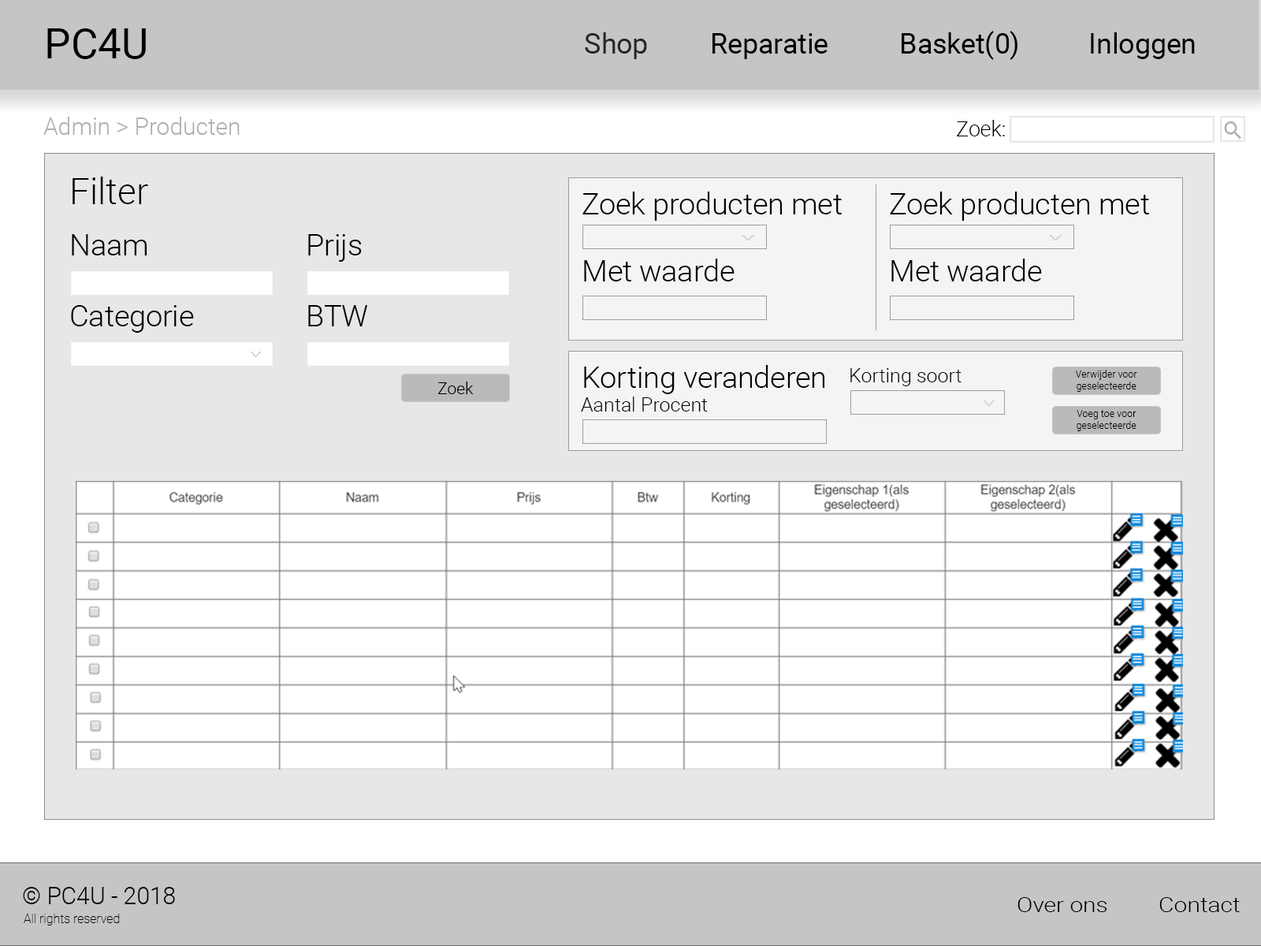
<style>
.page{position:relative;width:1261px;height:946px;background:#ffffff}
.page>*{position:absolute;margin:0}
.t1{font:42px "Roboto-Regular";color:#000000}
.t2{font:28px "Roboto-Regular";color:#000000}
.t3{font:28px "Roboto-Regular";color:#262626}
.t4{font:23.6px "Roboto-Light";color:#afafaf}
.t5{font:21px "Roboto-Light";color:#000000}
.t6{font:36.1px "Roboto-Light";color:#000000}
.t7{font:29.6px "Roboto-Light";color:#000000}
.t8{font:16.8px "Roboto-Light";color:#d0d0d0;scale:2.33 1}
.t9{font:16.8px "Roboto-Light";color:#d0d0d0;scale:1.95 1}
.t10{font:19.7px "Roboto-Light";color:#000000}
.t11{font:9.9px "Roboto-Light";color:#000000}
.t12{font:16.4px "Roboto-Light";color:#000000}
.t13{font:23.6px "Roboto-Light";color:#000000}
.t14{font:20.4px "Roboto-Light";color:#000000;scale:1.16 1}
.t15{font:12.6px "Roboto-Thin";color:#000000}
</style>
<div class="page">
<p class="t1" style="left:47px;top:28px;width:99px;height:31px">PC4U</p>
<p class="t2" style="left:585px;top:31px;width:610px;height:29px"><span class="t3">Shop</span>  Reparatie   Basket(0)   Inloggen</p>
<p class="t4" style="left:43px;top:117px;width:197px;height:18px">Admin &gt; Producten</p>
<p class="t5" style="left:957px;top:120px;width:48px;height:16px">Zoek:</p>
<p class="t6" style="left:73px;top:177px;width:75px;height:27px">Filter</p>
<p class="t7" style="left:582px;top:192px;width:260px;height:29px">Zoek producten met</p>
<p class="t7" style="left:890px;top:192px;width:259px;height:29px">Zoek producten met</p>
<p class="t7" style="left:72px;top:234px;width:75px;height:21px">Naam</p>
<p class="t7" style="left:308px;top:234px;width:54px;height:28px">Prijs</p>
<p class="t8" style="left:741px;top:235px;width:14px;height:5px">^</p>
<p class="t8" style="left:1048px;top:235px;width:14px;height:5px">^</p>
<p class="t7" style="left:584px;top:258px;width:150px;height:23px">Met waarde</p>
<p class="t7" style="left:891px;top:258px;width:151px;height:23px">Met waarde</p>
<p class="t7" style="left:71px;top:305px;width:123px;height:28px">Categorie</p>
<p class="t7" style="left:308px;top:305px;width:60px;height:21px">BTW</p>
<p class="t9" style="left:250px;top:351px;width:12px;height:6px">^</p>
<p class="t7" style="left:584px;top:365px;width:241px;height:29px">Korting veranderen</p>
<p class="t10" style="left:850px;top:368px;width:111px;height:18px">Korting soort</p>
<p class="t11" style="left:1075px;top:370px;width:62px;height:22px;text-align:center">Verwijder voor<br>geselecteerde</p>
<p class="t12" style="left:438px;top:381px;width:36px;height:13px">Zoek</p>
<p class="t10" style="left:581px;top:396px;width:127px;height:15px">Aantal Procent</p>
<p class="t9" style="left:983px;top:400px;width:12px;height:6px">^</p>
<p class="t11" style="left:1077px;top:410px;width:59px;height:21px;text-align:center">Voeg toe voor<br>geselecteerde</p>
<p class="t13" style="left:23px;top:887px;width:152px;height:17px">© PC4U - 2018</p>
<p class="t14" style="left:1017px;top:897px;width:223px;height:15px">Over ons  Contact</p>
<p class="t15" style="left:24px;top:913px;width:96px;height:12px">All rights reserved</p>
</div>
